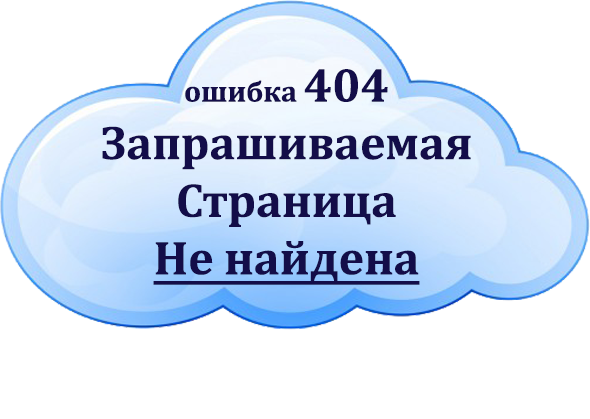
<style>
.page{position:relative;width:590px;height:419px;background:#ffffff}
.page>*{position:absolute;margin:0}
.t1{font:48px "Cambria-Bold";color:#130d49}
.t2{font:30px "Cambria-Bold";color:#130d49}
.t3{font:48px "Cambria-Bold";color:#130d49;text-decoration:underline}
</style>
<div class="page">
<p class="t1" style="left:102px;top:69px;width:369px;height:216px;text-align:center"><span class="t2">ошибка </span>404<br>Запрашиваемая Страница<br><span class="t3">Не найдена</span></p>
</div>
